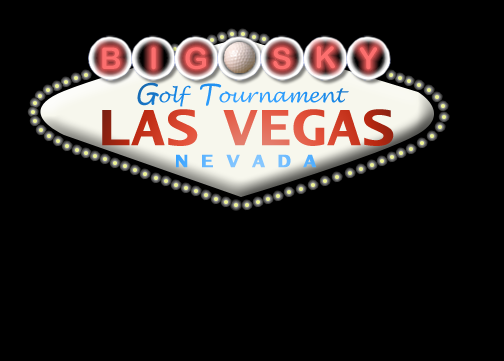
<style>
.page{position:relative;width:504px;height:361px;background:#000000}
.page>*{position:absolute;margin:0}
.t1{font:19.4px "LucidaHandwriting-Italic";color:#2f9fff}
.t2{font:25.9px "KristenITC-Regular";color:#2f9fff;font-style:italic}
.t3{font:47.1px "LucidaSans-TypewriterBold";letter-spacing:0.01em;font-weight:bold;scale:1.15 1}
.t4{font:17.1px "LucidaSans-TypewriterBold";letter-spacing:0.77em;font-weight:bold;scale:1.23 1}
</style>
<div class="page">
<p class="t1" style="left:137px;top:82px;width:212px;height:25px"><span class="t2">G</span>olf  <span class="t2">T</span>ournament</p>
<p class="t3" style="left:102px;top:109px;width:292px;height:37px">LAS VEGAS</p>
<p class="t4" style="left:176px;top:154px;width:141px;height:14px">NEVADA</p>
</div>
